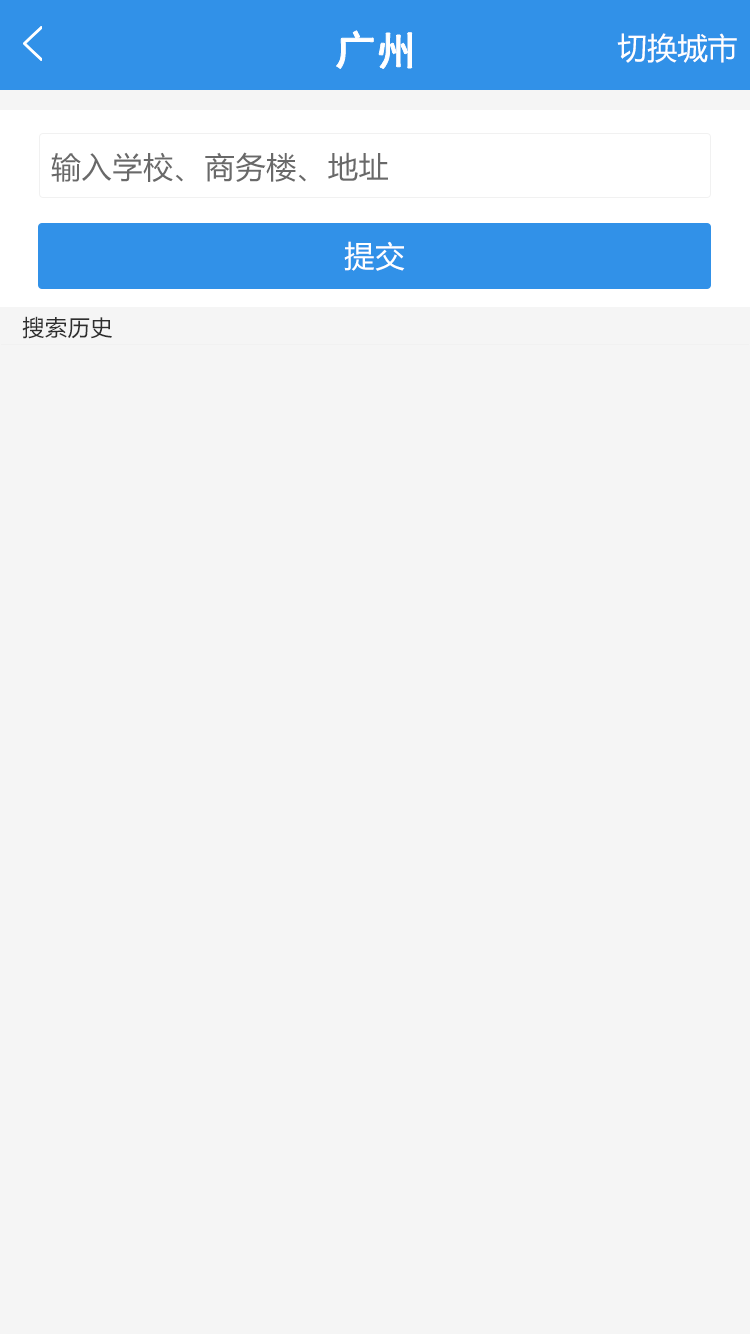
<style>
.page{position:relative;width:750px;height:1334px;background:#f5f5f5}
.page>*{position:absolute;margin:0}
.t1{font:40px "SimHei";color:#ffffff;font-weight:bold}
.t2{font:30px "MicrosoftYaHei";color:#ffffff}
.t3{font:30px "MicrosoftYaHei";letter-spacing:0.025em;color:#696969}
.t4{font:30px "MicrosoftYaHei";letter-spacing:0.025em;color:#ffffff}
.t5{font:22px "MicrosoftYaHei";letter-spacing:0.025em;color:#2e2e2e}
</style>
<div class="page">
<p class="t1" style="left:336px;top:30px;width:76px;height:39px">广州</p>
<p class="t2" style="left:617px;top:33px;width:120px;height:30px">切换城市</p>
<p class="t3" style="left:51px;top:152px;width:337px;height:30px">输入学校、商务楼、地址</p>
<p class="t4" style="left:344px;top:241px;width:61px;height:30px">提交</p>
<p class="t5" style="left:22px;top:316px;width:90px;height:23px">搜索历史</p>
</div>
